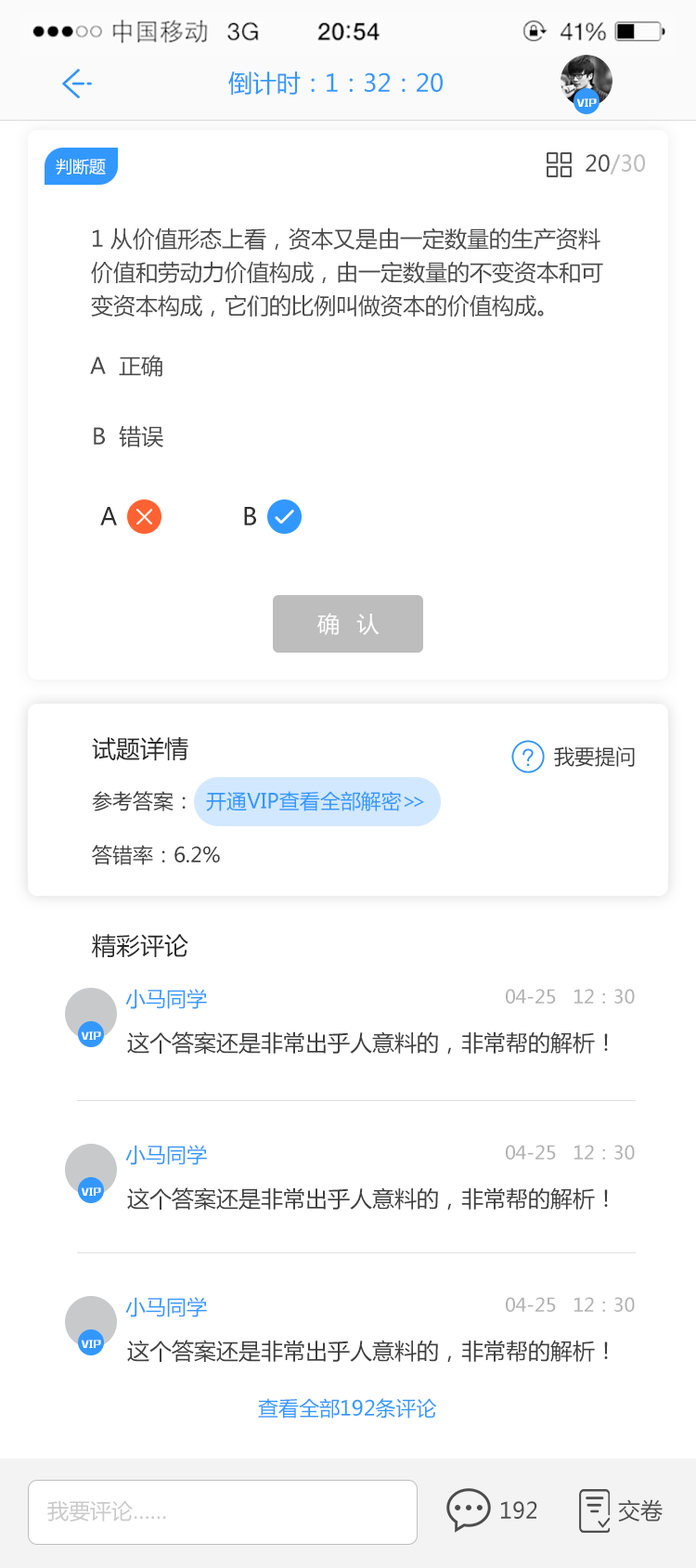
<style>
.page{position:relative;width:696px;height:1568px;background:#ffffff}
.page>*{position:absolute;margin:0}
.t1{font:24.1px "MicrosoftYaHei";color:#3298ff}
.t2{font:8.6px "MFLiHei_Noncommercial-Regular";color:#ffffff}
.t3{font:16.7px "MicrosoftYaHei";color:#ffffff}
.t4{font:22.3px "MicrosoftYaHei";color:#bdbdbd}
.t5{font:22.3px "MicrosoftYaHei";color:#4e4e4e}
.t6{font:22.3px/33.4px "MicrosoftYaHei";color:#4b4a4a}
.t7{font:22.3px "MicrosoftYaHei";color:#4b4a4a}
.t8{font:24.1px "MicrosoftYaHei";color:#2e2e2e}
.t9{font:22.3px "MicrosoftYaHei";letter-spacing:0.24em;color:#ffffff}
.t10{font:24.1px "MicrosoftYaHei";color:#292929}
.t11{font:20.4px "MicrosoftYaHei";color:#3e3e3e}
.t12{font:20.4px "MicrosoftYaHei";color:#3298ff}
.t13{font:20.4px "MicrosoftYaHei";letter-spacing:-0.26em;color:#3298ff}
.t14{font:18.6px "MicrosoftYaHei";color:#b2b2b2}
.t15{font:22.3px "MicrosoftYaHei";color:#3e3e3e}
.t16{font:21.4px "MicrosoftYaHei";color:#cbcaca}
</style>
<div class="page">
<p class="t1" style="left:228px;top:71px;width:215px;height:25px">倒计时：1：32：20</p>
<p class="t2" style="left:577px;top:98px;width:20px;height:9px">VIP</p>
<p class="t3" style="left:56px;top:159px;width:50px;height:16px">判断题</p>
<p class="t4" style="left:586px;top:154px;width:59px;height:21px"><span class="t5">20</span>/30</p>
<p class="t6" style="left:91px;top:227px;width:512px;height:90px">1 从价值形态上看，资本又是由一定数量的生产资料<br>价值和劳动力价值构成，由一定数量的不变资本和可<br>变资本构成，它们的比例叫做资本的价值构成。</p>
<p class="t7" style="left:90px;top:355px;width:72px;height:22px">A  正确</p>
<p class="t7" style="left:94px;top:425px;width:69px;height:22px">B  错误</p>
<p class="t8" style="left:100px;top:507px;width:17px;height:18px">A</p>
<p class="t8" style="left:244px;top:507px;width:12px;height:18px">B</p>
<p class="t9" style="left:317px;top:613px;width:63px;height:22px">确 认</p>
<p class="t10" style="left:92px;top:737px;width:96px;height:24px">试题详情</p>
<p class="t11" style="left:554px;top:746px;width:81px;height:21px">我要提问</p>
<p class="t12" style="left:92px;top:791px;width:332px;height:20px"><span class="t11">参考答案：  </span>开通VIP查看全部解密<span class="t13">&gt;&gt;</span></p>
<p class="t11" style="left:92px;top:845px;width:128px;height:20px">答错率：6.2%</p>
<p class="t10" style="left:92px;top:934px;width:96px;height:24px">精彩评论</p>
<p class="t12" style="left:125px;top:989px;width:82px;height:20px">小马同学</p>
<p class="t14" style="left:506px;top:989px;width:129px;height:15px">04-25   12：30</p>
<p class="t2" style="left:81px;top:1031px;width:20px;height:9px">VIP</p>
<p class="t15" style="left:127px;top:1031px;width:481px;height:24px">这个答案还是非常出乎人意料的，非常帮的解析！</p>
<p class="t12" style="left:125px;top:1145px;width:82px;height:20px">小马同学</p>
<p class="t14" style="left:506px;top:1145px;width:129px;height:15px">04-25   12：30</p>
<p class="t2" style="left:81px;top:1187px;width:20px;height:9px">VIP</p>
<p class="t15" style="left:127px;top:1187px;width:481px;height:24px">这个答案还是非常出乎人意料的，非常帮的解析！</p>
<p class="t12" style="left:125px;top:1297px;width:82px;height:20px">小马同学</p>
<p class="t14" style="left:506px;top:1297px;width:129px;height:15px">04-25   12：30</p>
<p class="t2" style="left:81px;top:1340px;width:20px;height:8px">VIP</p>
<p class="t15" style="left:127px;top:1340px;width:481px;height:23px">这个答案还是非常出乎人意料的，非常帮的解析！</p>
<p class="t12" style="left:258px;top:1398px;width:179px;height:21px">查看全部192条评论</p>
<p class="t16" style="left:47px;top:1500px;width:119px;height:22px">我要评论……</p>
<p class="t5" style="left:501px;top:1501px;width:37px;height:18px">192</p>
<p class="t5" style="left:618px;top:1499px;width:45px;height:23px">交卷</p>
</div>
